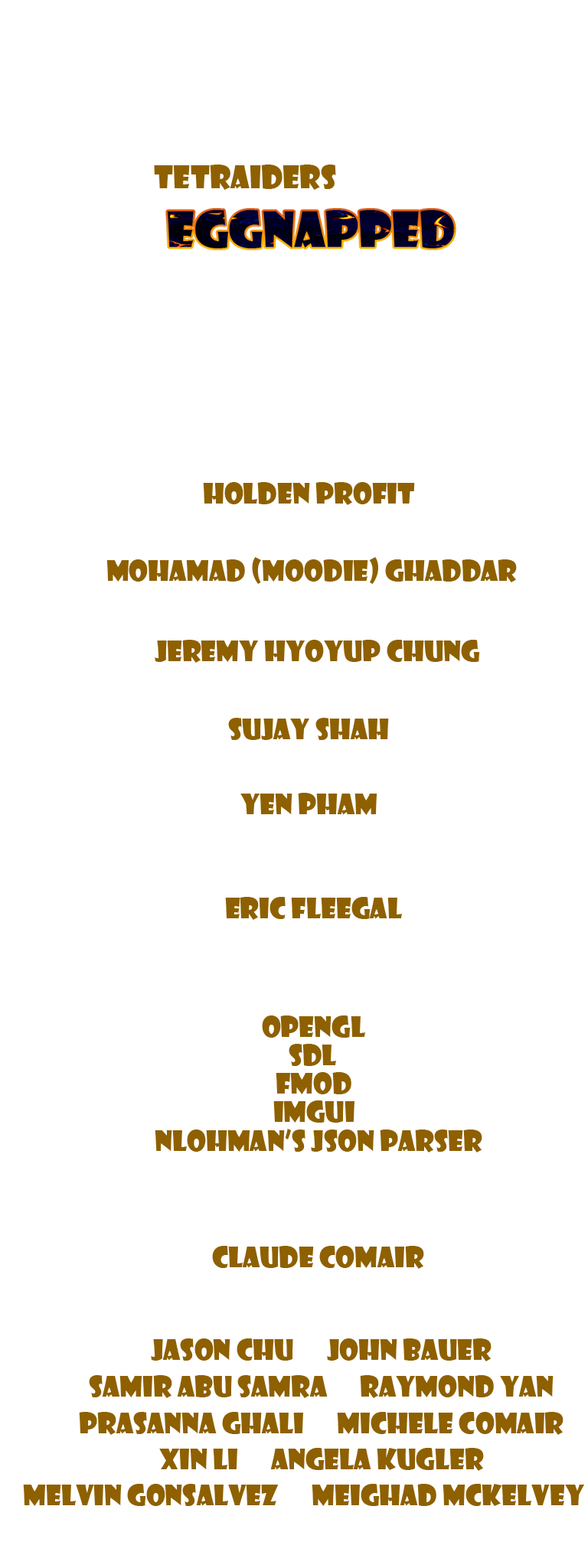
<style>
.page{position:relative;width:588px;height:1568px;background:#ffffff}
.page>*{position:absolute;margin:0}
.t1{font:30.6px "ShowcardGothic-Reg";color:#8e6000}
.t2{font:23px "ShowcardGothic-Reg";color:#ffffff}
.t3{font:27.5px "ShowcardGothic-Reg";color:#8e6000}
</style>
<div class="page">
<p class="t1" style="left:135px;top:165px;width:352px;height:25px"><span class="t2">A </span>TETRAIDERS<span class="t2"> PRODUCTION</span></p>
<p class="t3" style="left:203px;top:482px;width:212px;height:23px">holden profit</p>
<p class="t3" style="left:106px;top:557px;width:411px;height:27px">MOHAMAD (Moodie) Ghaddar</p>
<p class="t3" style="left:155px;top:640px;width:325px;height:23px">Jeremy hyoyup chung</p>
<p class="t3" style="left:228px;top:718px;width:161px;height:22px">sujay shah</p>
<p class="t3" style="left:240px;top:793px;width:137px;height:22px">yen pham</p>
<p class="t3" style="left:225px;top:897px;width:177px;height:23px">eric fleegal</p>
<p class="t3" style="left:262px;top:1015px;width:103px;height:23px">opengl</p>
<p class="t3" style="left:288px;top:1044px;width:48px;height:22px">sdl</p>
<p class="t3" style="left:275px;top:1072px;width:76px;height:22px">fmod</p>
<p class="t3" style="left:273px;top:1100px;width:81px;height:23px">imgui</p>
<p class="t3" style="left:155px;top:1129px;width:327px;height:23px">nlohman’s json parser</p>
<p class="t3" style="left:212px;top:1246px;width:212px;height:23px">claude comair</p>
<p class="t3" style="left:151px;top:1338px;width:340px;height:23px">jason chu      john bauer</p>
<p class="t3" style="left:89px;top:1375px;width:464px;height:23px">samir abu samra      raymond yan</p>
<p class="t3" style="left:79px;top:1412px;width:484px;height:23px">prasanna ghali      michele comair</p>
<p class="t3" style="left:159px;top:1448px;width:325px;height:23px">xin li      angela kugler</p>
<p class="t3" style="left:23px;top:1484px;width:561px;height:22px">melvin gonsalvez      meighad mckelvey</p>
</div>
